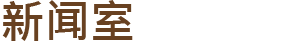
<style>
.page{position:relative;width:301px;height:53px;background:#ffffff}
.page>*{position:absolute;margin:0}
.t1{font:45px "MicrosoftJhengHeiBold";color:#684121}
</style>
<div class="page">
<p class="t1" style="left:2px;top:0px;width:131px;height:41px">新闻室</p>
</div>
